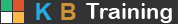
<style>
.page{position:relative;width:178px;height:24px;background:#333333}
.page>*{position:absolute;margin:0}
.t1{font:22px "ArialRoundedMTBold";color:#ffffff}
</style>
<div class="page">
<p class="t1" style="left:85px;top:3px;width:87px;height:20px">Training</p>
</div>
